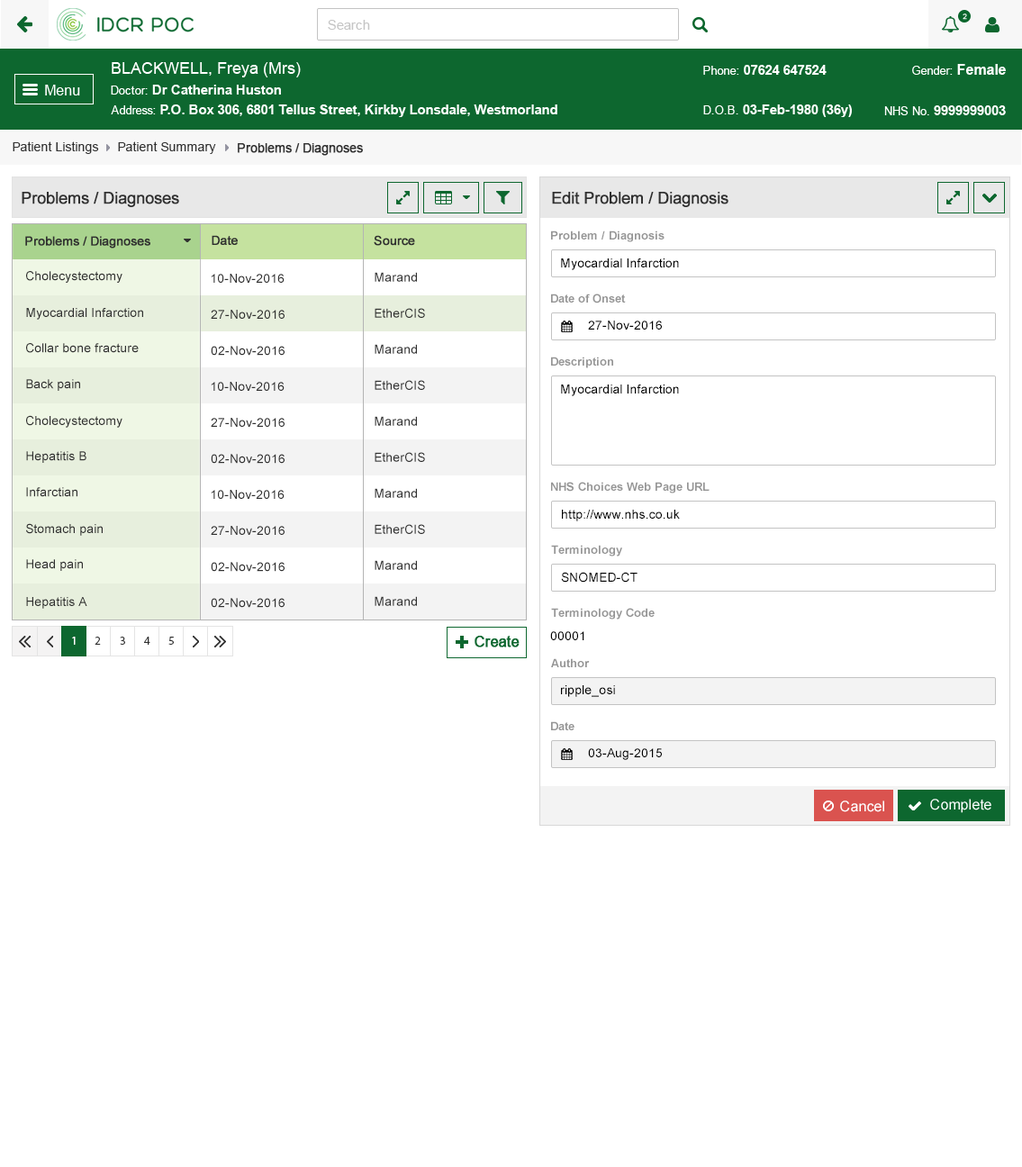
<style>
.page{position:relative;width:1022px;height:1167px;background:#ffffff}
.page>*{position:absolute;margin:0}
.t1{font:12.6px "ArialMT";color:#313131}
.t2{font:12.6px "ArialMT";color:#313131;font-weight:bold}
.t3{font:16.2px "ArialMT";color:#303030;font-weight:bold}
.t4{font:11.7px "Arial-BoldMT";color:#959595}
.t5{font:12.6px "ArialMT";color:#303030;font-weight:bold}
.t6{font:12.6px "ArialMT";color:#000000}
.t7{font:12.6px "ArialMT";color:#303030}
</style>
<div class="page">
<p class="t1" style="left:13px;top:141px;width:86px;height:13px">Patient Listings</p>
<p class="t1" style="left:118px;top:141px;width:98px;height:13px">Patient Summary</p>
<p class="t2" style="left:238px;top:143px;width:125px;height:13px">Problems / Diagnoses</p>
<p class="t3" style="left:22px;top:192px;width:157px;height:15px">Problems / Diagnoses</p>
<p class="t3" style="left:552px;top:192px;width:176px;height:15px">Edit Problem / Diagnosis</p>
<p class="t4" style="left:551px;top:230px;width:113px;height:12px">Problem / Diagnosis</p>
<p class="t5" style="left:25px;top:236px;width:125px;height:12px">Problems / Diagnoses</p>
<p class="t5" style="left:212px;top:235px;width:26px;height:10px">Date</p>
<p class="t5" style="left:374px;top:235px;width:41px;height:11px">Source</p>
<p class="t6" style="left:561px;top:258px;width:118px;height:12px">Myocardial Infarction</p>
<p class="t7" style="left:26px;top:271px;width:96px;height:12px">Cholecystectomy</p>
<p class="t7" style="left:211px;top:274px;width:74px;height:9px">10-Nov-2016</p>
<p class="t7" style="left:375px;top:272px;width:42px;height:10px">Marand</p>
<p class="t4" style="left:551px;top:294px;width:75px;height:9px">Date of Onset</p>
<p class="t7" style="left:26px;top:308px;width:117px;height:12px">Myocardial Infarction</p>
<p class="t7" style="left:211px;top:310px;width:74px;height:9px">27-Nov-2016</p>
<p class="t7" style="left:375px;top:308px;width:50px;height:10px">EtherCIS</p>
<p class="t6" style="left:588px;top:321px;width:74px;height:9px">27-Nov-2016</p>
<p class="t7" style="left:26px;top:343px;width:113px;height:10px">Collar bone fracture</p>
<p class="t7" style="left:211px;top:346px;width:74px;height:10px">02-Nov-2016</p>
<p class="t7" style="left:375px;top:344px;width:42px;height:10px">Marand</p>
<p class="t4" style="left:551px;top:357px;width:62px;height:11px">Description</p>
<p class="t7" style="left:26px;top:379px;width:54px;height:12px">Back pain</p>
<p class="t7" style="left:211px;top:382px;width:74px;height:9px">10-Nov-2016</p>
<p class="t7" style="left:375px;top:380px;width:50px;height:10px">EtherCIS</p>
<p class="t6" style="left:561px;top:384px;width:118px;height:12px">Myocardial Infarction</p>
<p class="t7" style="left:26px;top:415px;width:96px;height:13px">Cholecystectomy</p>
<p class="t7" style="left:211px;top:418px;width:74px;height:9px">27-Nov-2016</p>
<p class="t7" style="left:375px;top:416px;width:42px;height:10px">Marand</p>
<p class="t7" style="left:26px;top:451px;width:60px;height:12px">Hepatitis B</p>
<p class="t7" style="left:211px;top:454px;width:74px;height:10px">02-Nov-2016</p>
<p class="t7" style="left:375px;top:452px;width:50px;height:10px">EtherCIS</p>
<p class="t4" style="left:551px;top:482px;width:158px;height:11px">NHS Choices Web Page URL</p>
<p class="t7" style="left:26px;top:487px;width:51px;height:10px">Infarctian</p>
<p class="t7" style="left:211px;top:490px;width:74px;height:9px">10-Nov-2016</p>
<p class="t7" style="left:375px;top:488px;width:42px;height:10px">Marand</p>
<p class="t6" style="left:562px;top:510px;width:118px;height:11px">http://www.nhs.co.uk</p>
<p class="t7" style="left:26px;top:523px;width:77px;height:13px">Stomach pain</p>
<p class="t7" style="left:211px;top:526px;width:74px;height:9px">27-Nov-2016</p>
<p class="t7" style="left:375px;top:524px;width:50px;height:10px">EtherCIS</p>
<p class="t4" style="left:551px;top:545px;width:71px;height:11px">Terminology</p>
<p class="t7" style="left:26px;top:559px;width:57px;height:12px">Head pain</p>
<p class="t7" style="left:211px;top:562px;width:74px;height:10px">02-Nov-2016</p>
<p class="t7" style="left:375px;top:560px;width:42px;height:10px">Marand</p>
<p class="t6" style="left:561px;top:572px;width:76px;height:11px">SNOMED-CT</p>
<p class="t7" style="left:26px;top:597px;width:61px;height:12px">Hepatitis A</p>
<p class="t7" style="left:211px;top:598px;width:74px;height:10px">02-Nov-2016</p>
<p class="t7" style="left:375px;top:596px;width:42px;height:10px">Marand</p>
<p class="t4" style="left:551px;top:608px;width:104px;height:11px">Terminology Code</p>
<p class="t6" style="left:550px;top:631px;width:34px;height:9px">00001</p>
<p class="t4" style="left:551px;top:658px;width:39px;height:9px">Author</p>
<p class="t6" style="left:561px;top:685px;width:54px;height:12px">ripple_osi</p>
<p class="t4" style="left:551px;top:721px;width:23px;height:9px">Date</p>
<p class="t6" style="left:588px;top:748px;width:74px;height:12px">03-Aug-2015</p>
</div>
